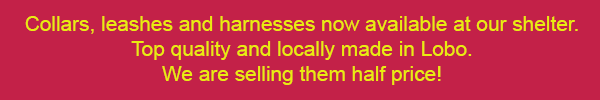
<style>
.page{position:relative;width:600px;height:100px;background:#c32148}
.page>*{position:absolute;margin:0}
.t1{font:20.8px "ArialMT";color:#e9ec10}
</style>
<div class="page">
<p class="t1" style="left:25px;top:16px;width:553px;height:69px;text-align:center">Collars, leashes and harnesses now available at our shelter.<br>Top quality and locally made in Lobo.<br>We are selling them half price!</p>
</div>
